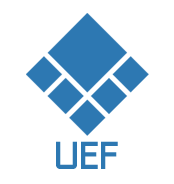
<style>
.page{position:relative;width:174px;height:184px;background:#ffffff}
.page>*{position:absolute;margin:0}
.t1{font:36px "ZeroesThree";color:#2d78b2}
</style>
<div class="page">
<p class="t1" style="left:56px;top:141px;width:62px;height:28px">UEF</p>
</div>
